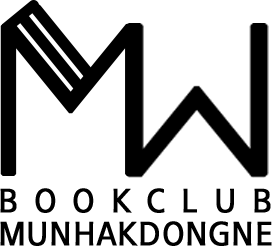
<style>
.page{position:relative;width:272px;height:246px;background:#ffffff}
.page>*{position:absolute;margin:0}
.t1{font:33.8px/32.7px "THELuxGoM";letter-spacing:0.02em;color:#000000;font-weight:bold;scale:0.92 1}
.t2{font:33.8px/27.3px "THELuxGoM";letter-spacing:0.52em;color:#000000;font-weight:bold;scale:0.92 1}
</style>
<div class="page">
<p class="t1" style="left:0px;top:188px;width:272px;height:58px"><span class="t2">BOOKCLUB<br></span>MUNHAKDONGNE</p>
</div>
